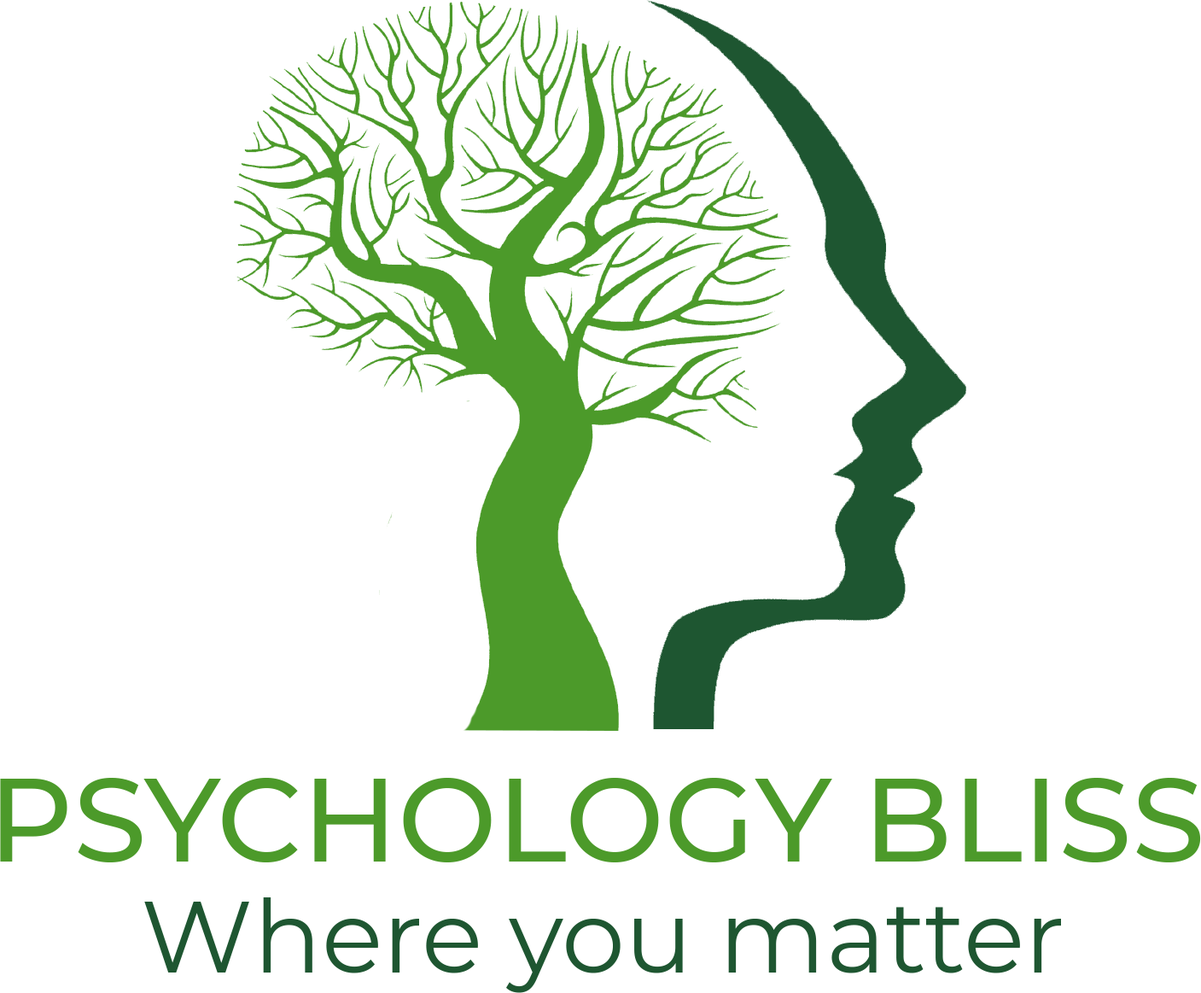
<style>
.page{position:relative;width:1201px;height:993px;background:#ffffff}
.page>*{position:absolute;margin:0}
.t1{font:117.8px "Montserrat-Medium";color:#4c9a2a}
.t2{font:100.7px "Montserrat-Regular";color:#1e5631}
</style>
<div class="page">
<p class="t1" style="left:0px;top:778px;width:1201px;height:84px">PSYCHOLOGY BLISS</p>
<p class="t2" style="left:144px;top:897px;width:917px;height:96px">Where you matter</p>
</div>
